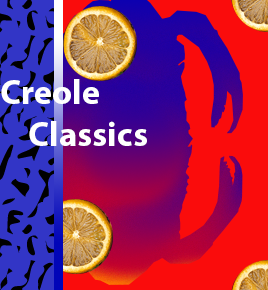
<style>
.page{position:relative;width:268px;height:290px;background:#fa0c0c}
.page>*{position:absolute;margin:0}
.t1{font:34.9px "MyriadPro-Bold";color:#ffffff}
</style>
<div class="page">
<p class="t1" style="left:1px;top:79px;width:146px;height:67px">Creole <br>    Classics</p>
</div>
